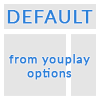
<style>
.page{position:relative;width:100px;height:100px;background:#e5e5e5}
.page>*{position:absolute;margin:0}
.t1{font:12px "Lato-Regular";letter-spacing:0.06em;color:#2b81d9;font-weight:bold}
.t2{font:18px "Lato-Regular";letter-spacing:0.06em;color:#2b81d9;font-weight:bold}
.t3{font:12px "Lato-Regular";letter-spacing:0.02em;color:#2b81d9;font-weight:bold}
</style>
<div class="page">
<p class="t1" style="left:7px;top:10px;width:86px;height:70px;text-align:center"><span class="t2">DEFAULT<br><br></span><br>from youplay<br>optio<span class="t3">ns</span></p>
</div>
